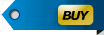
<style>
.page{position:relative;width:104px;height:35px}
.page>*{position:absolute;margin:0}
.t1{font:12px "Verdana-BoldItalic";letter-spacing:-0.075em;color:#000000}
</style>
<div class="page">
<p class="t1" style="left:62px;top:11px;width:28px;height:9px">BUY</p>
</div>
